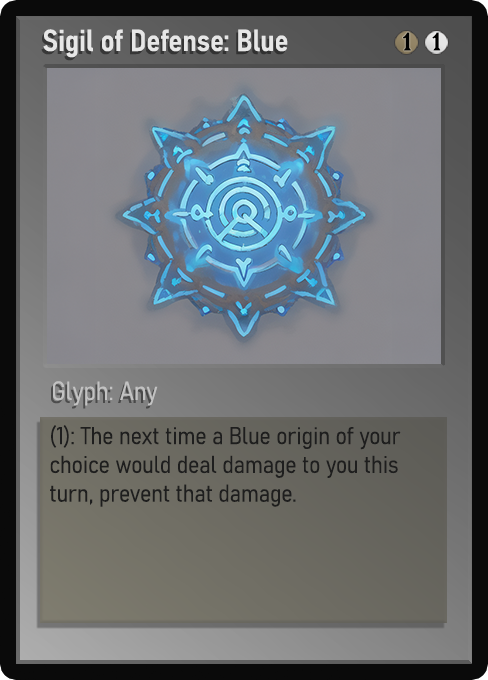
<style>
.page{position:relative;width:488px;height:680px}
.page>*{position:absolute;margin:0}
.t1{font:30px "Bahnschrift-SemiBoldSemiCondensed";color:#f2f2f2;font-weight:bold}
.t2{font:25px "WTRRoycroft";color:#000000;font-weight:bold;scale:1.09 1}
.t3{font:26px "Bahnschrift-LightSemiCondensed";color:#c8c8c8;font-weight:bold}
.t4{font:24px "Bahnschrift-LightSemiCondensed";color:#1e1e1e;font-weight:bold}
</style>
<div class="page">
<p class="t1" style="left:43px;top:29px;width:245px;height:29px;opacity:0.9">Sigil of Defense: Blue</p>
<p class="t2" style="left:403px;top:32px;width:8px;height:19px">1</p>
<p class="t2" style="left:432px;top:32px;width:9px;height:19px">1</p>
<p class="t3" style="left:53px;top:381px;width:105px;height:25px;opacity:0.9">Glyph: Any</p>
<p class="t4" style="left:50px;top:425px;width:351px;height:82px">(1): The next time a Blue origin of your choice would deal damage to you this turn, prevent that damage.</p>
</div>
